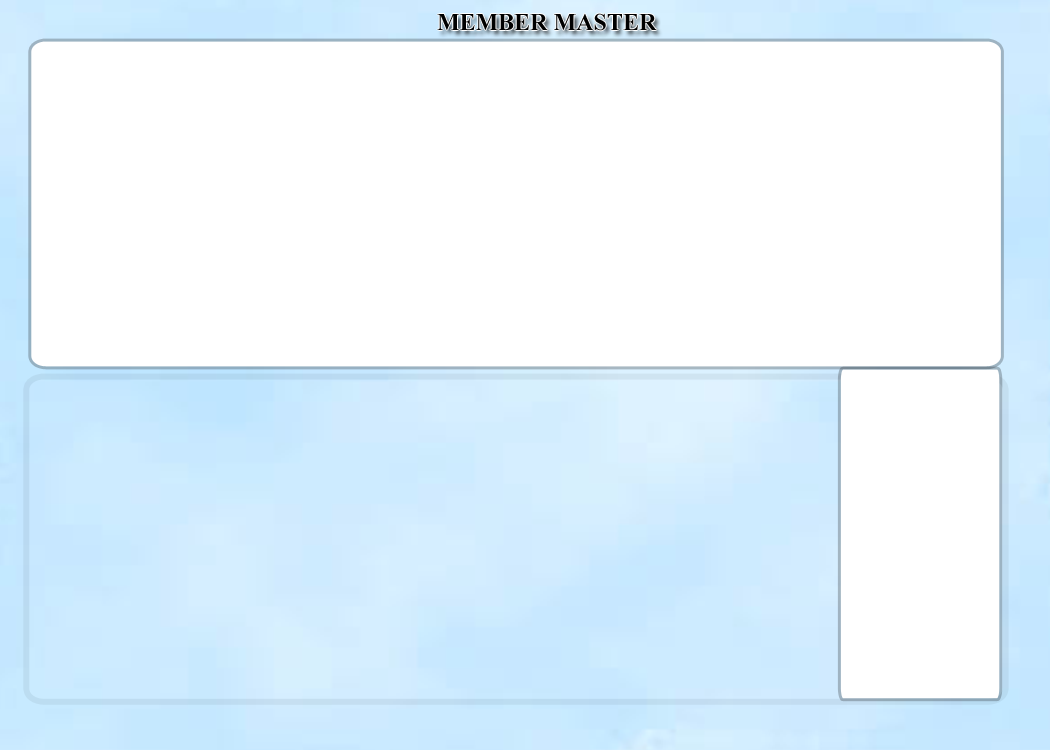
<style>
.page{position:relative;width:1050px;height:750px;background:#ffffff}
.page>*{position:absolute;margin:0}
.t1{font:24px "TimesNewRomanPS-BoldMT";color:#000000}
</style>
<div class="page">
<p class="t1" style="left:437px;top:13px;width:220px;height:18px">MEMBER MASTER</p>
</div>
